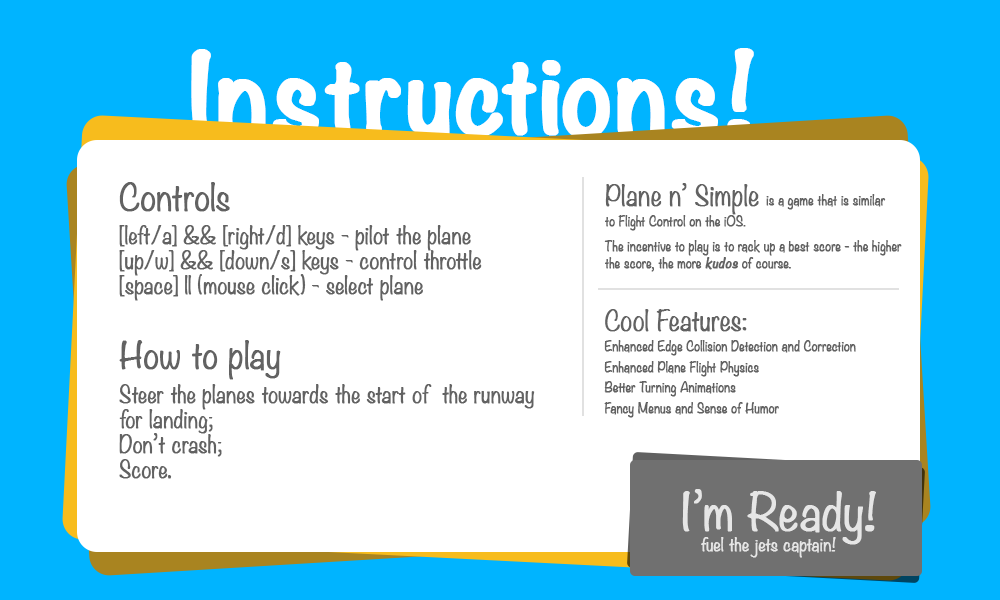
<style>
.page{position:relative;width:1000px;height:600px;background:#ffffff}
.page>*{position:absolute;margin:0}
.t1{font:100px "Noteworthy-Bold";color:#ffffff;font-weight:bold}
.t2{font:20.8px/25px "Noteworthy-Light";color:#626262;font-weight:bold}
.t3{font:33.3px/37.5px "Noteworthy-Light";color:#626262;font-weight:bold}
.t4{font:20.8px/33.3px "Noteworthy-Light";color:#626262;font-weight:bold}
.t5{font:33.3px/75px "Noteworthy-Light";color:#626262;font-weight:bold}
.t6{font:12.5px/25px "Noteworthy-Light";color:#626262;font-weight:bold}
.t7{font:25px/20.8px "Noteworthy-Light";color:#626262;font-weight:bold}
.t8{font:12.5px/20.8px "Noteworthy-Light";color:#626262;font-weight:bold}
.t9{font:12.5px/16.7px "Noteworthy-Light";color:#626262;font-weight:bold}
.t10{font:12.5px/16.7px "Noteworthy-Bold";color:#626262;font-weight:bold;font-style:italic}
.t11{font:25px/37.5px "Noteworthy-Light";color:#626262;font-weight:bold}
.t12{font:45.8px "Noteworthy-Light";color:#e6e6e6;font-weight:bold}
.t13{font:16.7px "Noteworthy-Light";color:#e6e6e6;font-weight:bold}
</style>
<div class="page">
<p class="t1" style="left:191px;top:48px;width:563px;height:91px">Instructions!</p>
<p class="t2" style="left:119px;top:182px;width:416px;height:297px"><span class="t3">Controls<br></span><span class="t4">[left/a] &amp;&amp; [right/d] keys - pilot the plane<br></span>[up/w] &amp;&amp; [down/s] keys - control throttle<br>[space] || (mouse click) - select plane<br><span class="t5">How to play<br></span><span class="t4">Steer the planes towards the start of  the runway<br></span>for landing;<br>Don’t crash;<br>Score.</p>
<p class="t6" style="left:604px;top:183px;width:298px;height:89px"><span class="t7">Plane n’ Simple </span><span class="t8">is a game that is similar<br>to Flight Control on the iOS.<br></span>The incentive to play is to rack up a best score - the higher<br><span class="t9">the score, the more </span><span class="t10">kudos</span><span class="t9"> of course.</span></p>
<p class="t8" style="left:604px;top:309px;width:252px;height:109px"><span class="t11">Cool Features:<br></span>Enhanced Edge Collision Detection and Correction<br>Enhanced Plane Flight Physics<br>Better Turning Animations<br>Fancy Menus and Sense of Humor</p>
<p class="t12" style="left:682px;top:489px;width:194px;height:56px">I’m Ready!</p>
<p class="t13" style="left:701px;top:537px;width:135px;height:21px">fuel the jets captain!</p>
</div>
